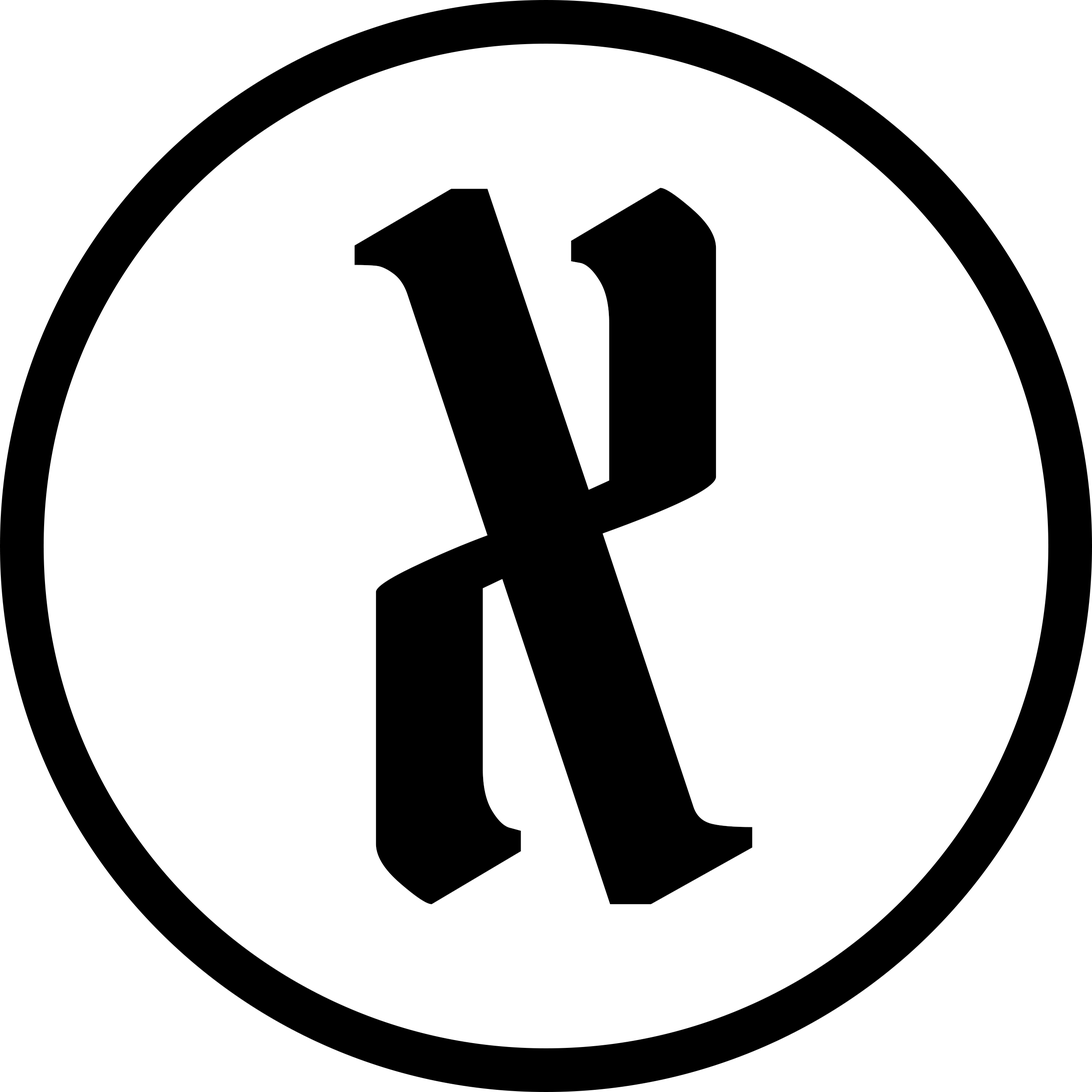
<style>
.page{position:relative;width:1092px;height:1092px;background:#ffffff}
.page>*{position:absolute;margin:0}
.t1{font:928.9px "PirataOne-Regular";color:#000000}
</style>
<div class="page">
<p class="t1" style="left:354px;top:188px;width:399px;height:716px">X</p>
</div>
